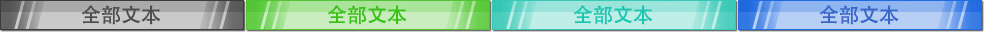
<style>
.page{position:relative;width:984px;height:32px}
.page>*{position:absolute;margin:0}
.t1{font:20px "AdobeHeitiStd-Regular";color:#4e4e4e}
.t2{font:20px "AdobeHeitiStd-Regular";color:#38c312}
.t3{font:20px "AdobeHeitiStd-Regular";color:#18c7b2}
.t4{font:20px "AdobeHeitiStd-Regular";color:#3867c9}
</style>
<div class="page">
<p class="t1" style="left:81px;top:5px;width:80px;height:20px">全部文本</p>
<p class="t2" style="left:327px;top:5px;width:80px;height:20px">全部文本</p>
<p class="t3" style="left:573px;top:5px;width:80px;height:20px">全部文本</p>
<p class="t4" style="left:819px;top:5px;width:80px;height:20px">全部文本</p>
</div>
